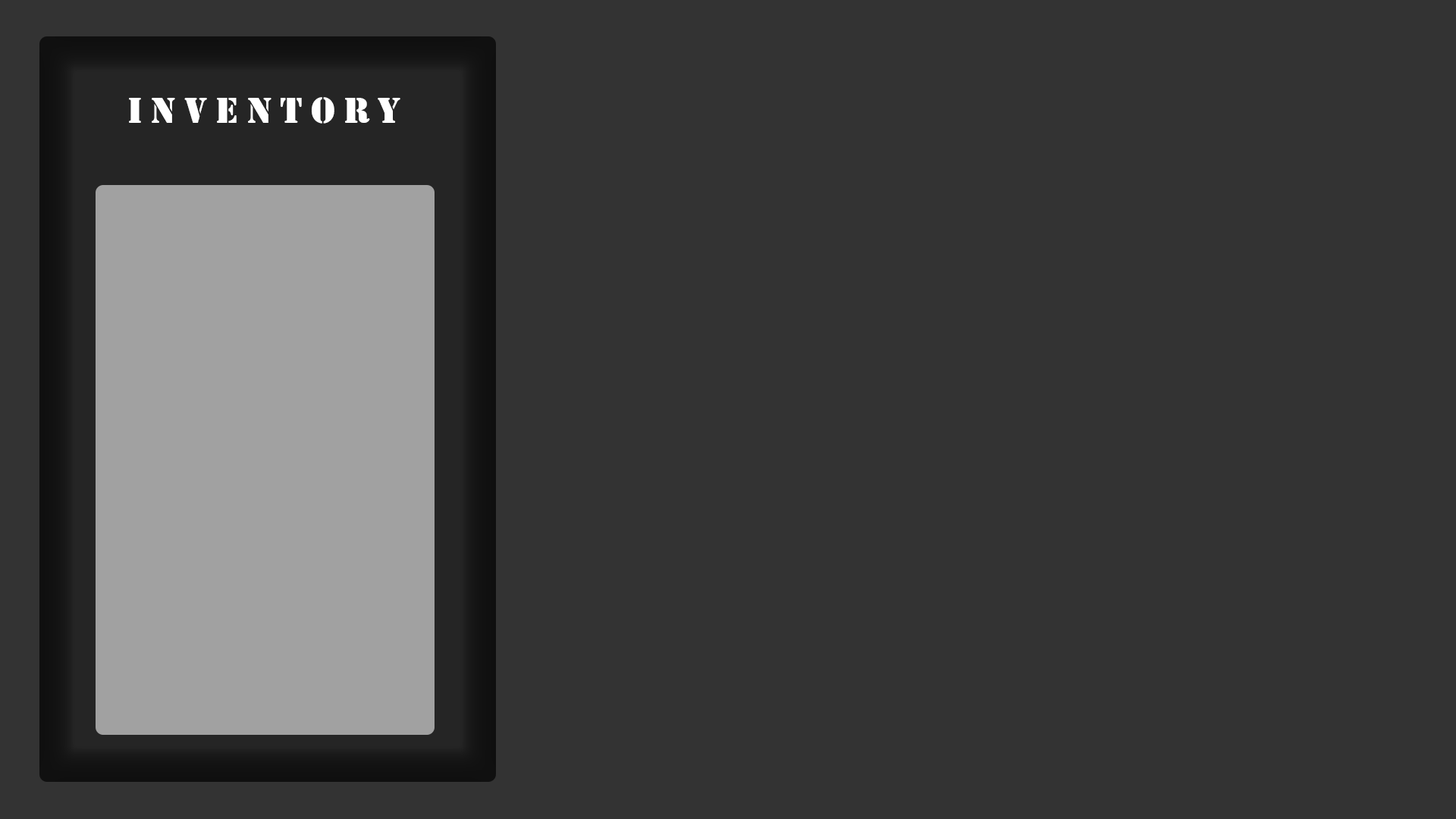
<style>
.page{position:relative;width:1456px;height:819px;background:#333333}
.page>*{position:absolute;margin:0}
.t1{font:37.9px "Stencil";letter-spacing:0.22em;color:#ffffff}
</style>
<div class="page">
<p class="t1" style="left:129px;top:97px;width:271px;height:27px">INVENTORY</p>
</div>
